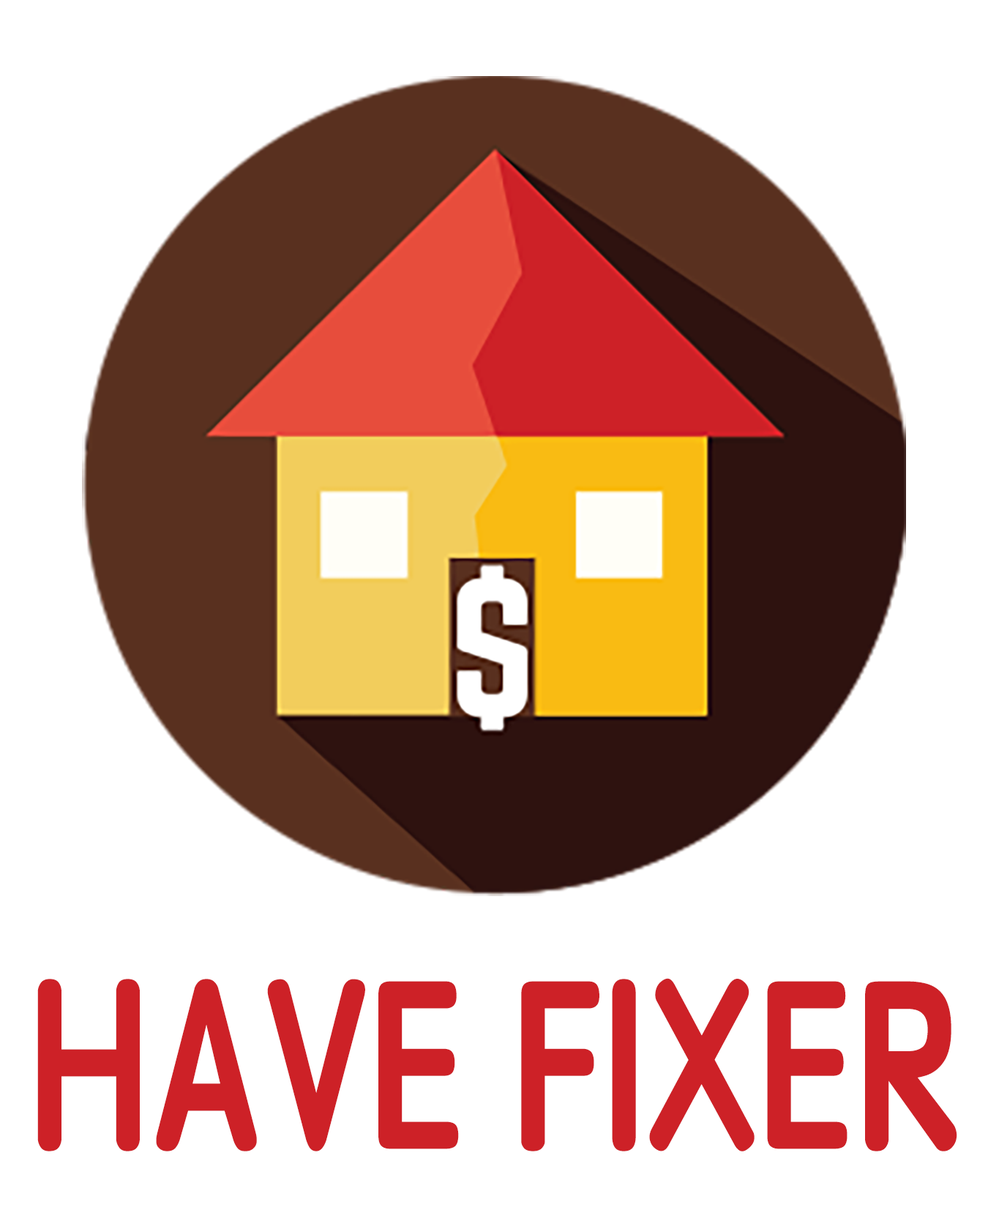
<style>
.page{position:relative;width:988px;height:1207px;background:#ffffff}
.page>*{position:absolute;margin:0}
.t1{font:240px "STYuanti-SC-Bold";color:#cd2127;scale:0.75 1}
</style>
<div class="page">
<p class="t1" style="left:37px;top:978px;width:920px;height:174px">HAVE FIXER</p>
</div>
